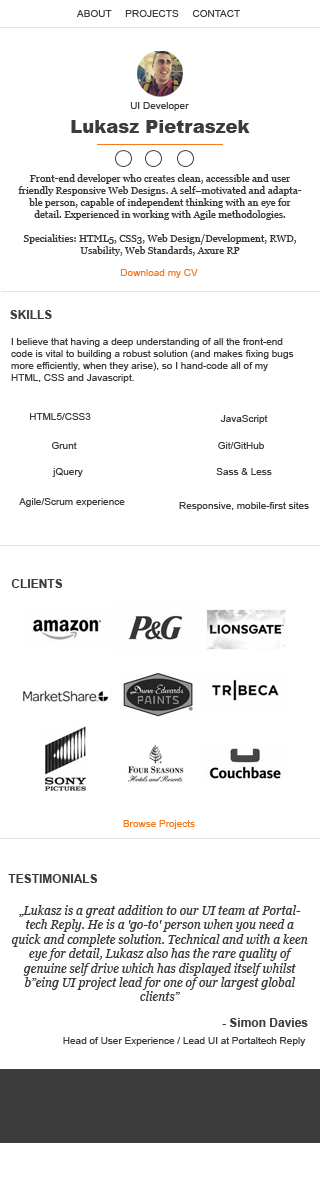
<style>
.page{position:relative;width:320px;height:1200px;background:#ffffff}
.page>*{position:absolute;margin:0}
.t1{font:10px "ArialMT";color:#3c3c3c}
.t2{font:18px "Arial-Black";color:#3c3c3c}
.t3{font:10px "Georgia";color:#3c3c3c}
.t4{font:10px "ArialMT";color:#f47a20}
.t5{font:12px "Arial-BoldMT";color:#3c3c3c}
.t6{font:12px "Georgia-Italic";color:#3c3c3c}
</style>
<div class="page">
<p class="t1" style="left:76px;top:10px;width:164px;height:7px">ABOUT     PROJECTS     CONTACT</p>
<p class="t1" style="left:130px;top:102px;width:59px;height:9px">UI Developer</p>
<p class="t2" style="left:71px;top:120px;width:179px;height:13px">Lukasz Pietraszek</p>
<p class="t3" style="left:18px;top:174px;width:284px;height:82px;text-align:center">Front-end developer who creates clean, accessible and user friendly Responsive Web Designs. A self–motivated and adaptable person, capable of independent thinking with an eye for detail. Experienced in working with Agile methodologies. <br><br>Specialities: HTML5, CSS3, Web Design/Development, RWD, Usability, Web Standards, Axure RP<br><br>Twitter: @pietraszekl</p>
<p class="t4" style="left:120px;top:269px;width:78px;height:9px">Download my CV</p>
<p class="t5" style="left:10px;top:310px;width:42px;height:9px">SKILLS</p>
<p class="t1" style="left:11px;top:338px;width:283px;height:45px">I believe that having a deep understanding of all the front-end code is vital to building a robust solution (and makes fixing bugs more efficiently, when they arise), so I hand-code all of my HTML, CSS and Javascript.</p>
<p class="t1" style="left:30px;top:413px;width:61px;height:7px">HTML5/CSS3</p>
<p class="t1" style="left:220px;top:415px;width:48px;height:9px">JavaScript</p>
<p class="t1" style="left:52px;top:442px;width:25px;height:7px">Grunt</p>
<p class="t1" style="left:218px;top:442px;width:46px;height:7px">Git/GitHub</p>
<p class="t1" style="left:52px;top:468px;width:31px;height:9px">jQuery</p>
<p class="t1" style="left:216px;top:468px;width:56px;height:7px">Sass &amp; Less</p>
<p class="t1" style="left:19px;top:498px;width:106px;height:9px">Agile/Scrum experience</p>
<p class="t1" style="left:179px;top:502px;width:130px;height:9px">Responsive, mobile-first sites</p>
<p class="t5" style="left:11px;top:579px;width:52px;height:9px">CLIENTS</p>
<p class="t4" style="left:123px;top:820px;width:72px;height:9px">Browse Projects</p>
<p class="t5" style="left:8px;top:874px;width:90px;height:9px">TESTIMONIALS</p>
<p class="t6" style="left:11px;top:905px;width:297px;height:96px;text-align:center">„Lukasz is a great addition to our UI team at Portaltech Reply. He is a 'go-to' person when you need a quick and complete solution. Technical and with a keen eye for detail, Lukasz also has the rare quality of genuine self drive which has displayed itself whilst b”eing UI project lead for one of our largest global clients”</p>
<p class="t5" style="left:222px;top:1018px;width:86px;height:9px">- Simon Davies</p>
<p class="t1" style="left:63px;top:1037px;width:243px;height:9px">Head of User Experience / Lead UI at Portaltech Reply</p>
</div>
